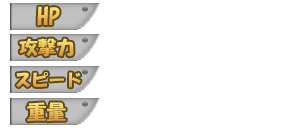
<style>
.page{position:relative;width:297px;height:128px;background:#ffffff}
.page>*{position:absolute;margin:0}
.t1{font:23px "HGSoeiKakupoptai"}
.t2{font:18.4px "HGSoeiKakupoptai"}
.t3{font:17px "HGSoeiKakupoptai"}
.t4{font:19.6px "HGSoeiKakupoptai"}
</style>
<div class="page">
<p class="t1" style="left:37px;top:6px;width:23px;height:20px">HP</p>
<p class="t2" style="left:19px;top:38px;width:55px;height:19px">攻撃力</p>
<p class="t3" style="left:16px;top:72px;width:65px;height:16px">スピード</p>
<p class="t4" style="left:27px;top:102px;width:39px;height:20px">重量</p>
</div>
